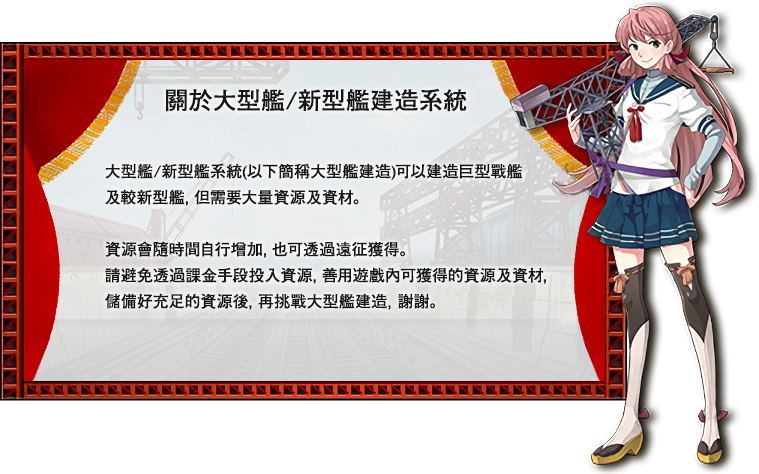
<style>
.page{position:relative;width:759px;height:474px;background:#ffffff}
.page>*{position:absolute;margin:0}
.t1{font:24px "FutoGoB101Pr5-Bold";color:#171616}
.t2{font:16px/26px "FutoGoB101Pr5-Bold";color:#171616}
</style>
<div class="page">
<p class="t1" style="left:166px;top:88px;width:301px;height:24px">關於大型艦/新型艦建造系統</p>
<p class="t2" style="left:105px;top:163px;width:441px;height:147px">大型艦/新型艦系統(以下簡稱大型艦建造)可以建造巨型戰艦<br>及較新型艦，但需要大量資源及資材。<br><br>資源會隨時間自行增加，也可透過遠征獲得。<br>請避免透過課金手段投入資源，善用遊戲內可獲得的資源及資材，<br>儲備好充足的資源後，再挑戰大型艦建造，謝謝。</p>
</div>
